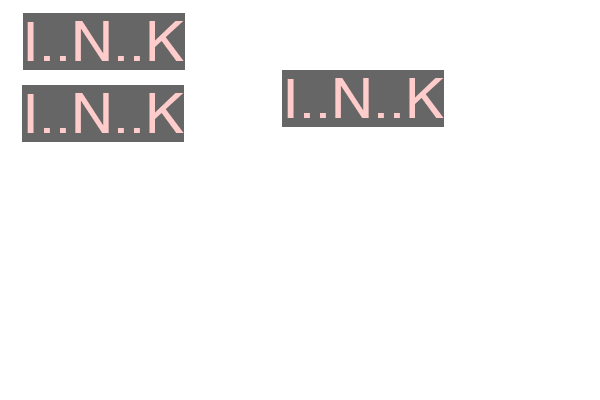
<style>
.page{position:relative;width:600px;height:400px;background:#ffffff}
.page>*{position:absolute;margin:0}
.t1{font:55px "Helvetica";color:#ffcccc;scale:1.06 1}
</style>
<div class="page">
<p class="t1" style="left:27px;top:21px;width:157px;height:40px">I..N..K</p>
<p class="t1" style="left:27px;top:93px;width:157px;height:40px">I..N..K</p>
</div>
